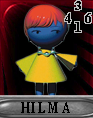
<style>
.page{position:relative;width:93px;height:118px}
.page>*{position:absolute;margin:0}
.t1{font:12.5px "TimesNewRomanPS-BoldMT";letter-spacing:0.2em;color:#000000}
.t2{font:14.1px "TimesNewRomanPS-BoldMT";letter-spacing:0.2em;color:#000000}
.t3{font:14px "TimesNewRomanPS-BoldMT";letter-spacing:0.2em;color:#000000}
.t4{font:13.9px "TimesNewRomanPS-BoldMT";letter-spacing:0.2em;color:#000000}
.t5{font:16.4px "TimesNewRomanPS-BoldMT";letter-spacing:0.2em;color:#000000;scale:0.69 1}
</style>
<div class="page">
<p class="t1" style="left:75px;top:1px;width:6px;height:9px">3</p>
<p class="t2" style="left:65px;top:13px;width:6px;height:10px">4</p>
<p class="t3" style="left:85px;top:13px;width:6px;height:10px">6</p>
<p class="t4" style="left:75px;top:22px;width:6px;height:10px">1</p>
<p class="t5" style="left:21px;top:102px;width:49px;height:11px">HILMA</p>
</div>
